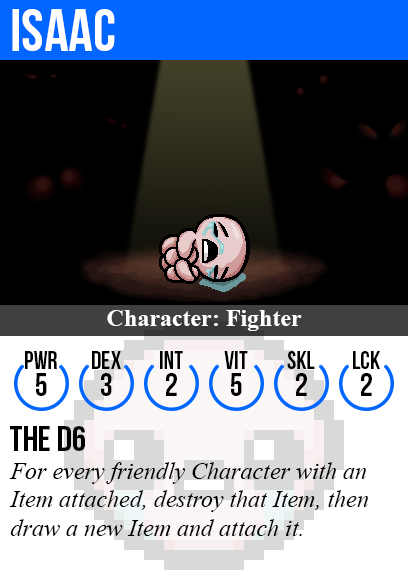
<style>
.page{position:relative;width:408px;height:585px;background:#000000}
.page>*{position:absolute;margin:0}
.t1{font:60px "BebasNeue";color:#ffffff}
.t2{font:24px "TimesNewRomanPS-BoldMT";color:#ffffff}
.t3{font:25px "BebasNeue";color:#000000}
.t4{font:32px "BebasNeue";color:#000000}
.t5{font:36px "BebasNeue";color:#000000}
.t6{font:24px "TimesNewRomanPS-ItalicMT";color:#000000}
</style>
<div class="page">
<p class="t1" style="left:12px;top:9px;width:103px;height:42px">isaac</p>
<p class="t2" style="left:107px;top:310px;width:195px;height:21px">Character: Fighter</p>
<p class="t3" style="left:25px;top:351px;width:32px;height:18px">PWR</p>
<p class="t3" style="left:92px;top:351px;width:29px;height:18px">dex</p>
<p class="t3" style="left:160px;top:351px;width:23px;height:18px">int</p>
<p class="t3" style="left:224px;top:351px;width:24px;height:18px">vit</p>
<p class="t3" style="left:287px;top:351px;width:28px;height:18px">skl</p>
<p class="t3" style="left:353px;top:351px;width:27px;height:18px">lck</p>
<p class="t4" style="left:36px;top:373px;width:11px;height:23px">5</p>
<p class="t4" style="left:101px;top:373px;width:11px;height:23px">3</p>
<p class="t4" style="left:166px;top:373px;width:11px;height:23px">2</p>
<p class="t4" style="left:231px;top:373px;width:11px;height:23px">5</p>
<p class="t4" style="left:296px;top:373px;width:11px;height:23px">2</p>
<p class="t4" style="left:361px;top:373px;width:11px;height:23px">2</p>
<p class="t5" style="left:10px;top:426px;width:75px;height:25px">the d6</p>
<p class="t6" style="left:9px;top:462px;width:359px;height:74px">For every friendly Character with an<br>Item attached, destroy that Item, then<br>draw a new Item and attach it.</p>
</div>
